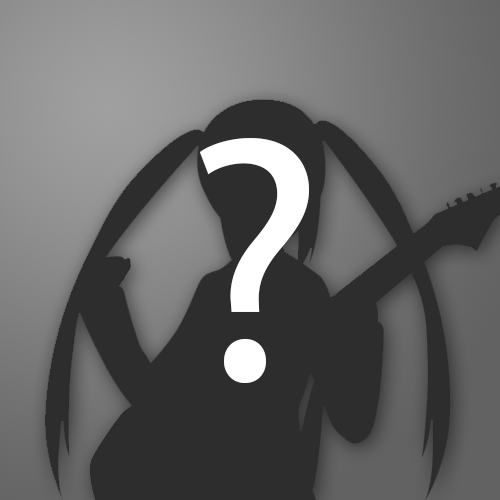
<style>
.page{position:relative;width:500px;height:500px;background:#2d2d2d}
.page>*{position:absolute;margin:0}
.t1{font:352px "MyriadPro-Regular";color:#ffffff}
</style>
<div class="page">
<p class="t1" style="left:199px;top:138px;width:110px;height:245px">?</p>
</div>
